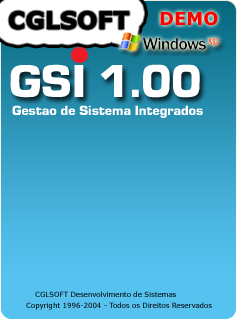
<style>
.page{position:relative;width:237px;height:320px}
.page>*{position:absolute;margin:0}
.t1{font:24px "Verdana-Bold";color:#000000}
.t2{font:18px "Verdana-Bold";color:#ff0000}
.t3{font:48px "Eurostile-Black";color:#ffffff}
.t4{font:14px "Eurostile-Black";color:#ffffff}
.t5{font:7px "Verdana";color:#000000}
.t6{font:7px "Verdana"}
</style>
<div class="page">
<p class="t1" style="left:9px;top:11px;width:120px;height:19px">CGLSOFT</p>
<p class="t2" style="left:160px;top:11px;width:58px;height:15px">DEMO</p>
<p class="t3" style="left:10px;top:64px;width:190px;height:34px">GSI 1.00</p>
<p class="t4" style="left:12px;top:105px;width:191px;height:13px">Gestao de Sistema Integrados</p>
<p class="t5" style="left:35px;top:291px;width:141px;height:6px">CGLSOFT Desenvolvimento de Sistemas</p>
<p class="t6" style="left:26px;top:302px;width:186px;height:8px">Copyright 1996-2004 - Todos os Direitos Reservados</p>
</div>
